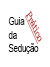
<style>
.page{position:relative;width:50px;height:67px;background:#ffffff}
.page>*{position:absolute;margin:0}
.t1{font:11.4px "DokChampa";color:#000000;scale:0.66 1}
.t2{font:9px "SchadowBT-Roman";color:#b91919;text-decoration:underline;scale:1.15 1}
</style>
<div class="page">
<p class="t1" style="left:8px;top:17px;width:31px;height:37px;text-align:right">Guia<br>da<br>Sedução</p>
<p class="t2" style="left:24px;top:10px;width:18px;height:35px;rotate:66deg">Prático</p>
</div>
